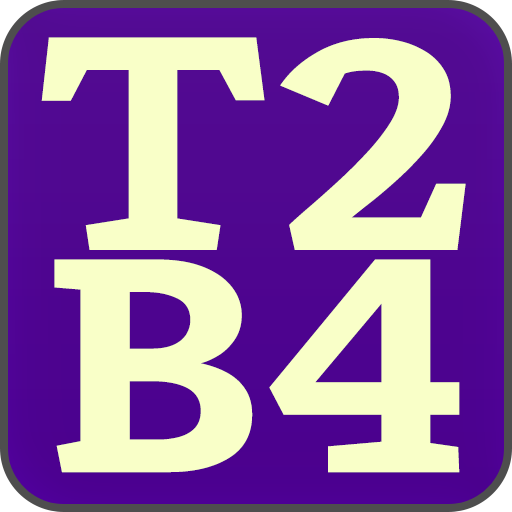
<style>
.page{position:relative;width:512px;height:512px;background:#f9ffc8}
.page>*{position:absolute;margin:0}
.t1{font:307.3px/222.1px "Kreon-Bold";letter-spacing:0.02em;color:#f9ffc8;font-variant:small-caps;scale:1.21 1}
</style>
<div class="page">
<p class="t1" style="left:41px;top:37px;width:425px;height:436px;text-align:center">T2<br>B4</p>
</div>
